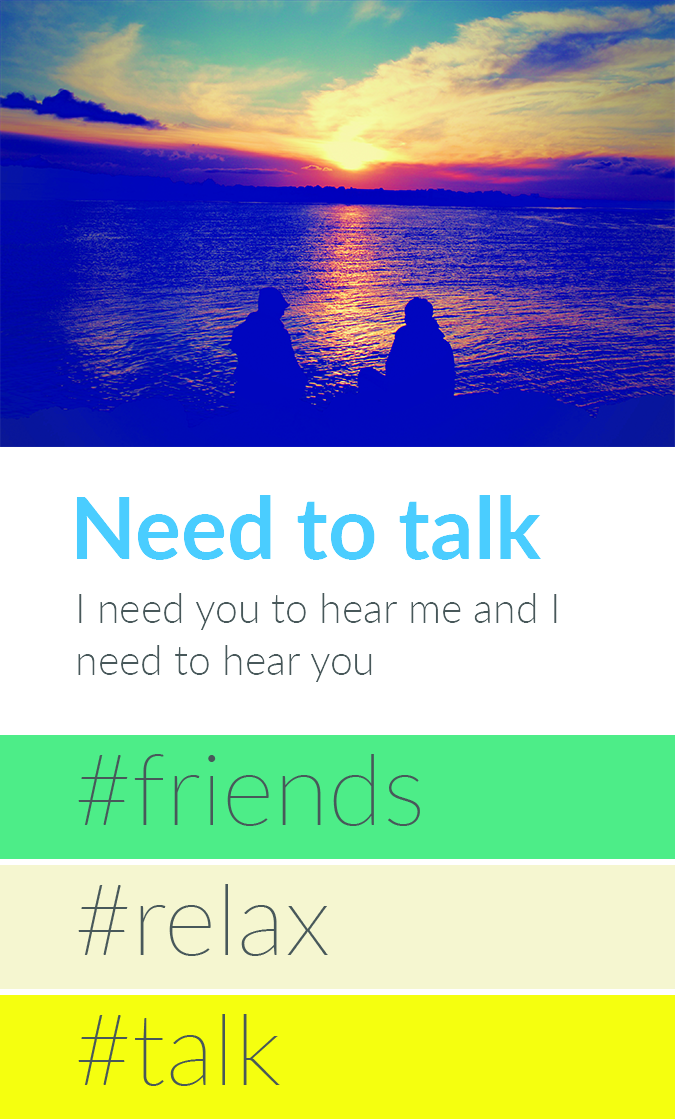
<style>
.page{position:relative;width:675px;height:1119px;background:#ffffff}
.page>*{position:absolute;margin:0}
.t1{font:86px "Lato-Bold";color:#4acdff}
.t2{font:41px/52px "Lato-Light";color:#48585a}
</style>
<div class="page">
<p class="t1" style="left:76px;top:495px;width:465px;height:65px">Need to talk</p>
<p class="t2" style="left:78px;top:593px;width:479px;height:89px;text-align:right">I need you to hear me and I need to hear you</p>
</div>
